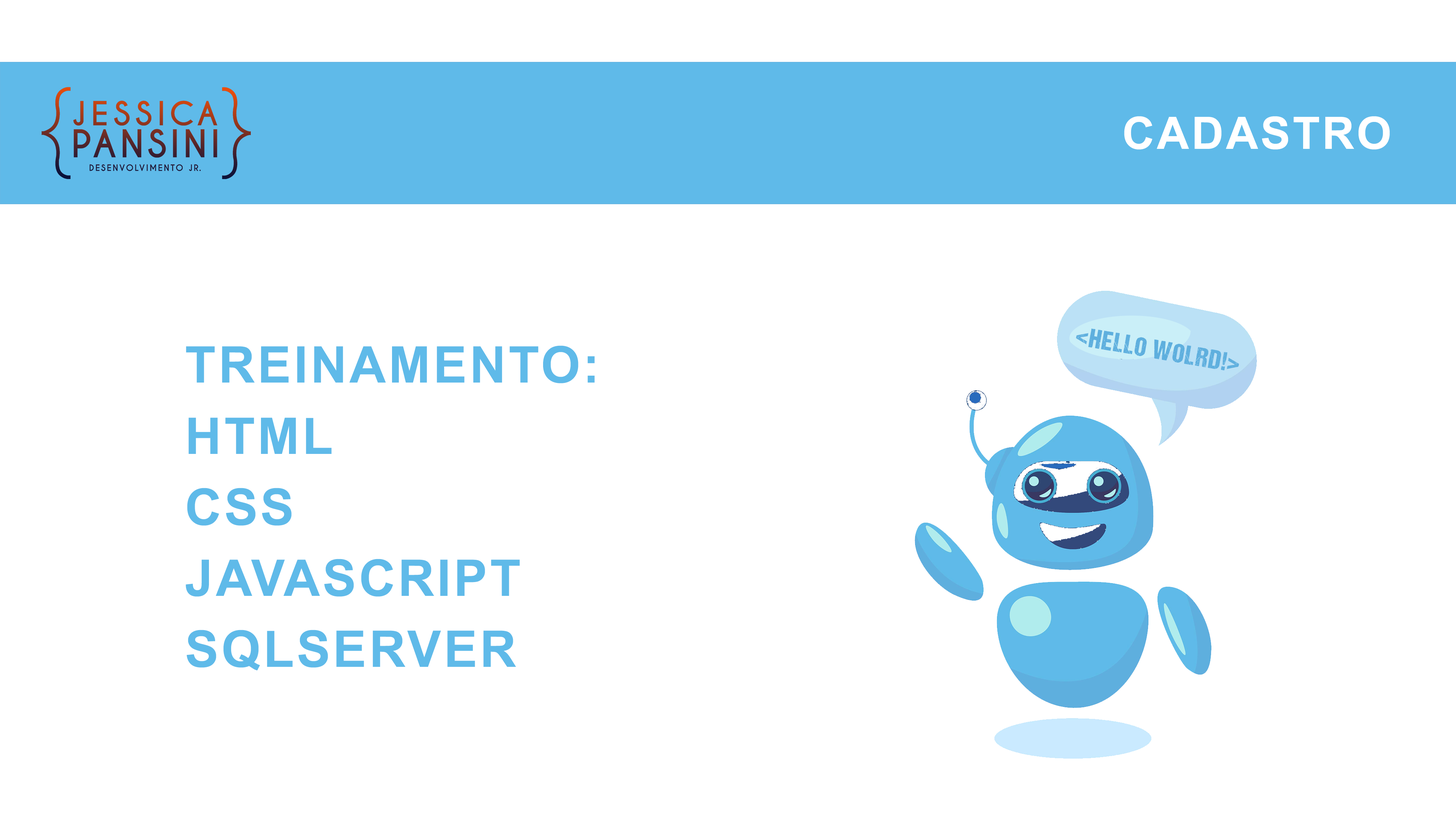
<style>
.page{position:relative;width:1456px;height:819px;background:#ffffff}
.page>*{position:absolute;margin:0}
.t1{font:44.7px "Arial-BoldMT";letter-spacing:0.05em;color:#ffffff}
.t2{font:26.8px "DCC-Ash";letter-spacing:0.05em;color:#5eafde}
.t3{font:50.6px/71.1px "Arial-BoldMT";letter-spacing:0.05em;color:#5fbae9}
</style>
<div class="page">
<p class="t1" style="left:1124px;top:116px;width:266px;height:34px">CADASTRO</p>
<p class="t2" style="left:1076px;top:328px;width:163px;height:43px;rotate:10deg">&lt;HELLO WOLRD!&gt;</p>
<p class="t3" style="left:186px;top:345px;width:409px;height:325px">TREINAMENTO:<br>HTML<br>CSS<br>JAVASCRIPT<br>SQLSERVER</p>
</div>
